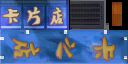
<style>
.page{position:relative;width:128px;height:64px}
.page>*{position:absolute;margin:0}
.t1{font:24px "SJlingyunzhangcao";color:#dbca97;font-weight:bold}
.t2{font:24px "SJlingyunzhangcao";color:#dbca97}
.t3{font:38px "SJlingyunzhangcao";color:#b8a04d;font-weight:bold}
.t4{font:36px "SJlingyunzhangcao";color:#b8a04d}
.t5{font:36px "SJlingyunzhangcao";color:#b8a04d;font-weight:bold}
</style>
<div class="page">
<p class="t1" style="left:2px;top:8px;width:17px;height:16px">卡</p>
<p class="t2" style="left:27px;top:7px;width:13px;height:18px">片</p>
<p class="t1" style="left:50px;top:7px;width:13px;height:18px">店</p>
<p class="t3" style="left:13px;top:38px;width:27px;height:20px;rotate:90deg">店</p>
<p class="t4" style="left:56px;top:37px;width:19px;height:22px;rotate:90deg">之</p>
<p class="t5" style="left:93px;top:36px;width:22px;height:25px;rotate:90deg">卡</p>
</div>
